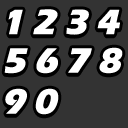
<style>
.page{position:relative;width:128px;height:128px;background:#333333}
.page>*{position:absolute;margin:0}
.t1{font:36px "ErasITC-Bold";letter-spacing:0.2em;color:#ffffff;font-weight:bold;font-style:italic}
</style>
<div class="page">
<p class="t1" style="left:8px;top:9px;width:112px;height:26px">1234</p>
<p class="t1" style="left:4px;top:47px;width:119px;height:27px">5678</p>
<p class="t1" style="left:5px;top:88px;width:54px;height:27px">90</p>
</div>
